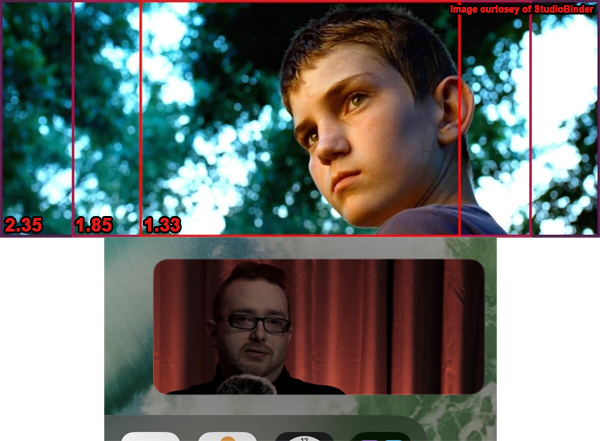
<style>
.page{position:relative;width:600px;height:441px}
.page>*{position:absolute;margin:0}
.t1{font:9px "Arial-BoldMT";color:#de1d1c;font-weight:bold}
.t2{font:18px "Arial-BoldMT";color:#de1d1c;font-weight:bold}
</style>
<div class="page">
<p class="t1" style="left:450px;top:5px;width:144px;height:10px">Image curtosey of StudioBinder</p>
<p class="t2" style="left:5px;top:218px;width:37px;height:14px">2.35</p>
<p class="t2" style="left:76px;top:218px;width:36px;height:14px">1.85</p>
<p class="t2" style="left:144px;top:218px;width:36px;height:14px">1.33</p>
</div>
